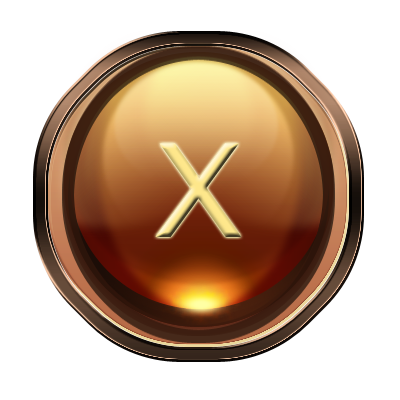
<style>
.page{position:relative;width:400px;height:400px;background:#ffffff}
.page>*{position:absolute;margin:0}
.t1{font:130px "ArialMT"}
</style>
<div class="page">
<p class="t1" style="left:155px;top:143px;width:86px;height:94px">X</p>
</div>
